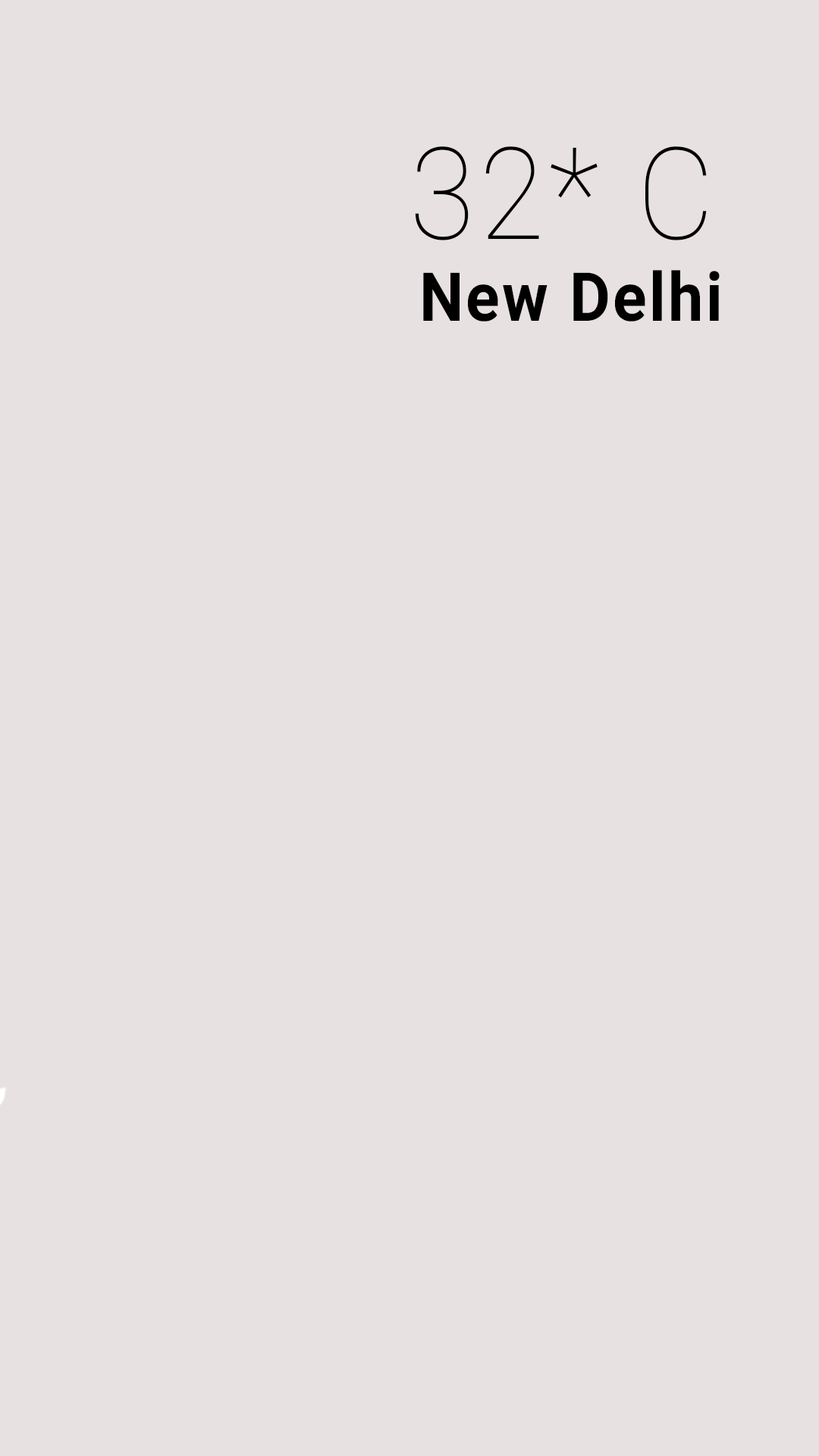
<style>
.page{position:relative;width:819px;height:1456px;background:#e7e1e1}
.page>*{position:absolute;margin:0}
.t1{font:128px "Roboto-Thin";letter-spacing:0.04em;color:#000000;scale:0.93 1}
.t2{font:67.5px "Roboto-Bold";letter-spacing:0.04em;color:#000000;scale:0.93 1}
</style>
<div class="page">
<p class="t1" style="left:415px;top:146px;width:292px;height:94px">32* C</p>
<p class="t2" style="left:423px;top:270px;width:297px;height:52px">New Delhi</p>
</div>
